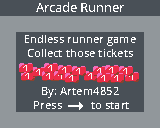
<style>
.page{position:relative;width:160px;height:128px;background:#495057}
.page>*{position:absolute;margin:0}
.t1{font:12.5px "OpenSans-Medium";color:#ffffff}
.t2{font:11.2px "OpenSans-Medium";color:#ffffff}
</style>
<div class="page">
<p class="t1" style="left:36px;top:2px;width:88px;height:10px">Arcade Runner</p>
<p class="t2" style="left:25px;top:35px;width:111px;height:11px">Endless runner game</p>
<p class="t2" style="left:28px;top:49px;width:105px;height:8px">Collect those tickets</p>
<p class="t2" style="left:42px;top:87px;width:77px;height:11px">By: Artem4852</p>
<p class="t2" style="left:34px;top:101px;width:28px;height:8px">Press</p>
<p class="t2" style="left:91px;top:102px;width:38px;height:7px">to start</p>
</div>
